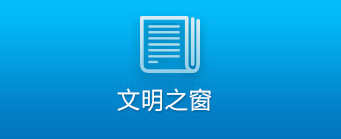
<style>
.page{position:relative;width:341px;height:139px}
.page>*{position:absolute;margin:0}
.t1{font:23.4px "MicrosoftYaHei";letter-spacing:0.05em;color:#fdfefe}
</style>
<div class="page">
<p class="t1" style="left:117px;top:88px;width:95px;height:24px">文明之窗</p>
</div>
